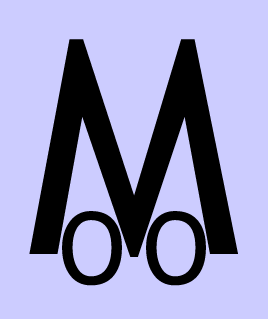
<style>
.page{position:relative;width:268px;height:319px;background:#ccccff}
.page>*{position:absolute;margin:0}
.t1{font:300px "TrebuchetMS";color:#000000}
.t2{font:100px "TrebuchetMS";color:#000000}
</style>
<div class="page">
<p class="t1" style="left:29px;top:39px;width:209px;height:218px">M</p>
<p class="t2" style="left:62px;top:211px;width:60px;height:75px">O</p>
<p class="t2" style="left:146px;top:211px;width:60px;height:75px">O</p>
</div>
